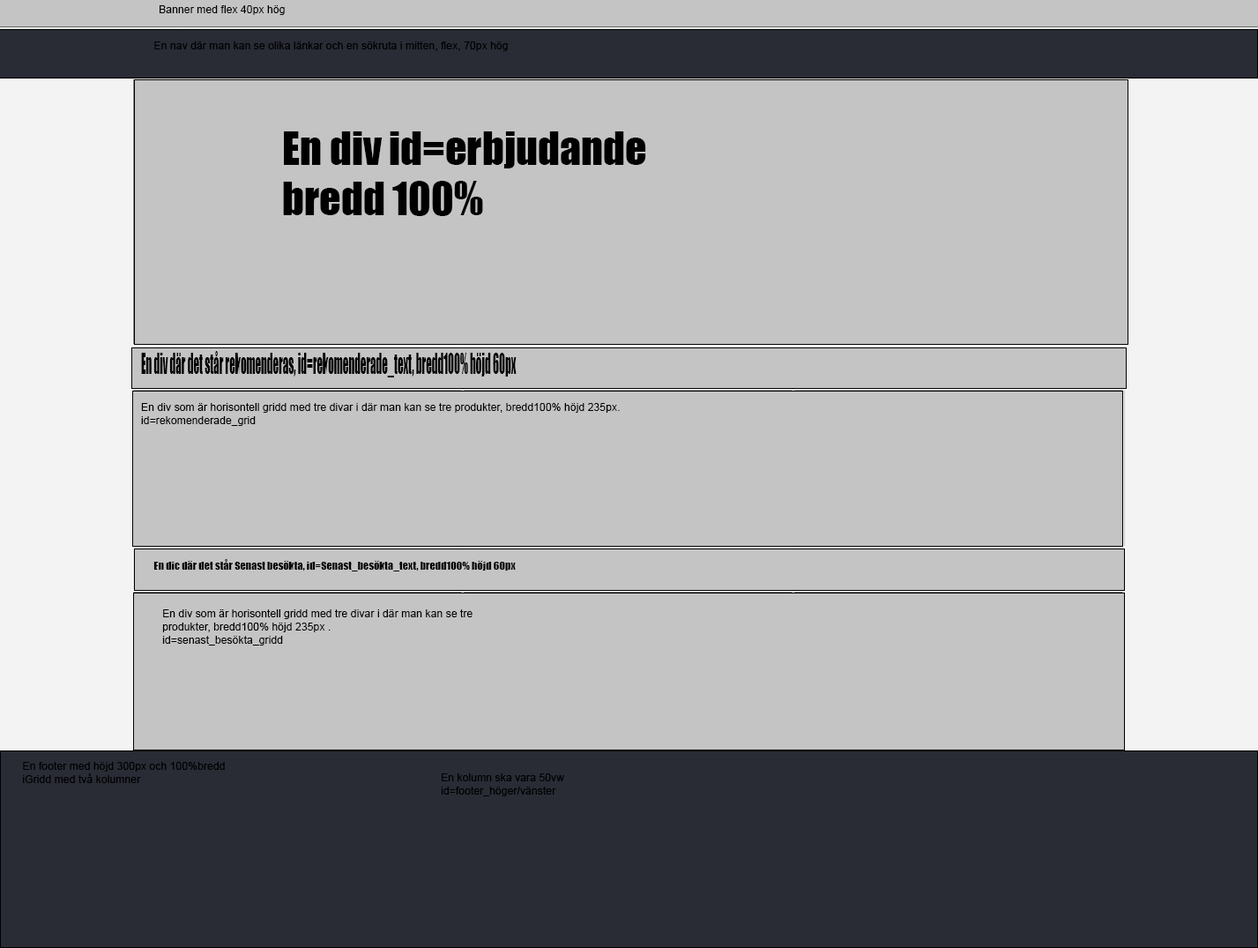
<style>
.page{position:relative;width:1258px;height:948px;background:#c4c4c4}
.page>*{position:absolute;margin:0}
.t1{font:10.8px "ArialMT";color:#000000}
.t2{font:42.3px "Impact";color:#000000}
.t3{font:26.4px "Impact";color:#000000;scale:0.43 1}
.t4{font:10.8px "Impact";color:#000000}
</style>
<div class="page">
<p class="t1" style="left:160px;top:5px;width:125px;height:10px">Banner med flex 40px hög</p>
<p class="t1" style="left:154px;top:41px;width:354px;height:10px">En nav där man kan se olika länkar och en sökruta i mitten, flex, 70px hög</p>
<p class="t2" style="left:283px;top:131px;width:363px;height:85px">En div id=erbjudande<br>bredd 100%</p>
<p class="t3" style="left:141px;top:351px;width:376px;height:26px">En div där det står rekomenderas, id=rekomenderade_text, bredd100% höjd 60px</p>
<p class="t1" style="left:141px;top:403px;width:479px;height:23px">En div som är horisontell gridd med tre divar i där man kan se tre produkter, bredd100% höjd 235px.<br>id=rekomenderade_grid</p>
<p class="t4" style="left:153px;top:559px;width:363px;height:12px">En dic där det står Senast besökta, id=Senast_besökta_text, bredd100% höjd 60px</p>
<p class="t1" style="left:162px;top:609px;width:311px;height:36px">En div som är horisontell gridd med tre divar i där man kan se tre produkter, bredd100% höjd 235px .<br>id=senast_besökta_gridd</p>
<p class="t1" style="left:23px;top:762px;width:202px;height:21px">En footer med höjd 300px och 100%bredd<br>iGridd med två kolumner</p>
<p class="t1" style="left:441px;top:773px;width:123px;height:23px">En kolumn ska vara 50vw id=footer_höger/vänster</p>
</div>
